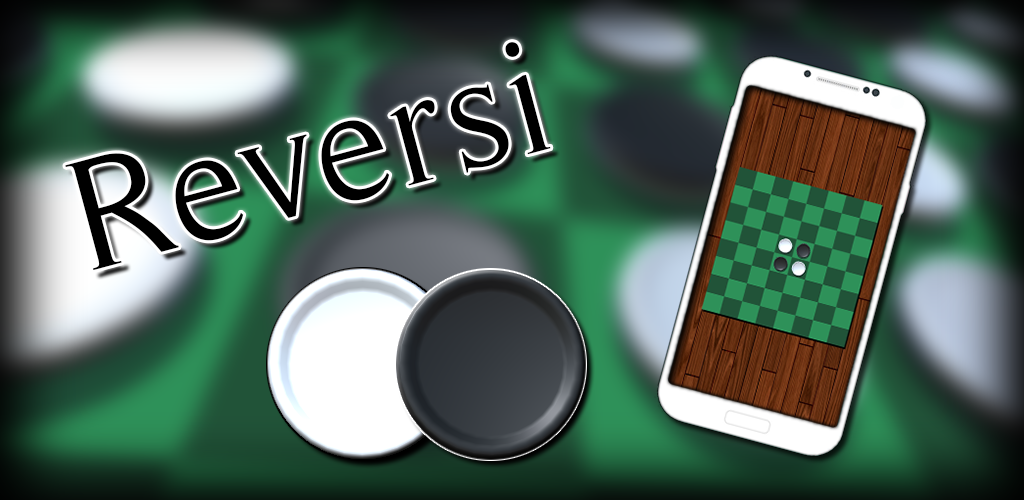
<style>
.page{position:relative;width:1024px;height:500px}
.page>*{position:absolute;margin:0}
.t1{font:160px "Timeless-Normal";letter-spacing:0.05em;color:#000000}
</style>
<div class="page">
<p class="t1" style="left:65px;top:42px;width:486px;height:229px;rotate:-15deg">Reversi</p>
</div>
